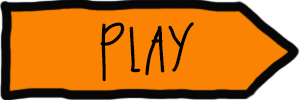
<style>
.page{position:relative;width:300px;height:100px;background:#fb8303}
.page>*{position:absolute;margin:0}
.t1{font:72px "BlackTinBox";color:#000000}
</style>
<div class="page">
<p class="t1" style="left:100px;top:22px;width:94px;height:59px">Play</p>
</div>
